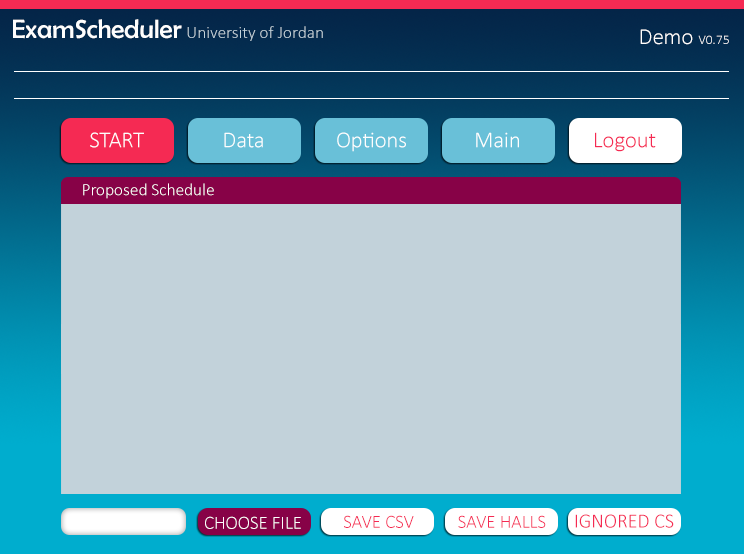
<style>
.page{position:relative;width:744px;height:554px;background:#c2d2da}
.page>*{position:absolute;margin:0}
.t1{font:26.7px "BerlinSansFB-Reg";color:#fefefe}
.t2{font:17.3px "Calibri-Light";color:#c2d2da}
.t3{font:13.3px "Calibri-Light";color:#fefefe}
.t4{font:22.7px "Calibri-Light";color:#fefefe}
.t5{font:22.7px "Calibri-Light";color:#f52a53}
.t6{font:17.3px "Calibri-Light";color:#ffffff}
.t7{font:18.7px "Calibri-Light";color:#fefefe}
.t8{font:18.7px "Calibri-Light";color:#f52a53}
.t9{font:20px "Calibri-Light";color:#f52a53}
</style>
<div class="page">
<p class="t1" style="left:13px;top:19px;width:169px;height:20px">ExamScheduler</p>
<p class="t2" style="left:187px;top:26px;width:136px;height:15px">University of Jordan</p>
<p class="t3" style="left:640px;top:29px;width:89px;height:16px"><span class="t4">Demo </span>V0.75</p>
<p class="t4" style="left:90px;top:132px;width:54px;height:16px">START</p>
<p class="t4" style="left:224px;top:132px;width:39px;height:16px">Data</p>
<p class="t4" style="left:337px;top:132px;width:69px;height:20px">Options</p>
<p class="t4" style="left:476px;top:132px;width:43px;height:16px">Main</p>
<p class="t5" style="left:595px;top:132px;width:61px;height:20px">Logout</p>
<p class="t6" style="left:83px;top:183px;width:131px;height:16px">Proposed Schedule</p>
<p class="t7" style="left:205px;top:516px;width:96px;height:13px">CHOOSE FILE</p>
<p class="t8" style="left:344px;top:515px;width:70px;height:13px">SAVE CSV</p>
<p class="t8" style="left:458px;top:515px;width:88px;height:13px">SAVE HALLS</p>
<p class="t9" style="left:575px;top:514px;width:99px;height:14px">IGNORED CS</p>
</div>
